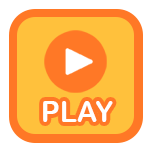
<style>
.page{position:relative;width:150px;height:150px;background:#ffc13c}
.page>*{position:absolute;margin:0}
.t1{font:28.8px "ArialRoundedMTBold";letter-spacing:0.025em;color:#ffffff;scale:0.96 1}
</style>
<div class="page">
<p class="t1" style="left:43px;top:101px;width:70px;height:21px">PLAY</p>
</div>
